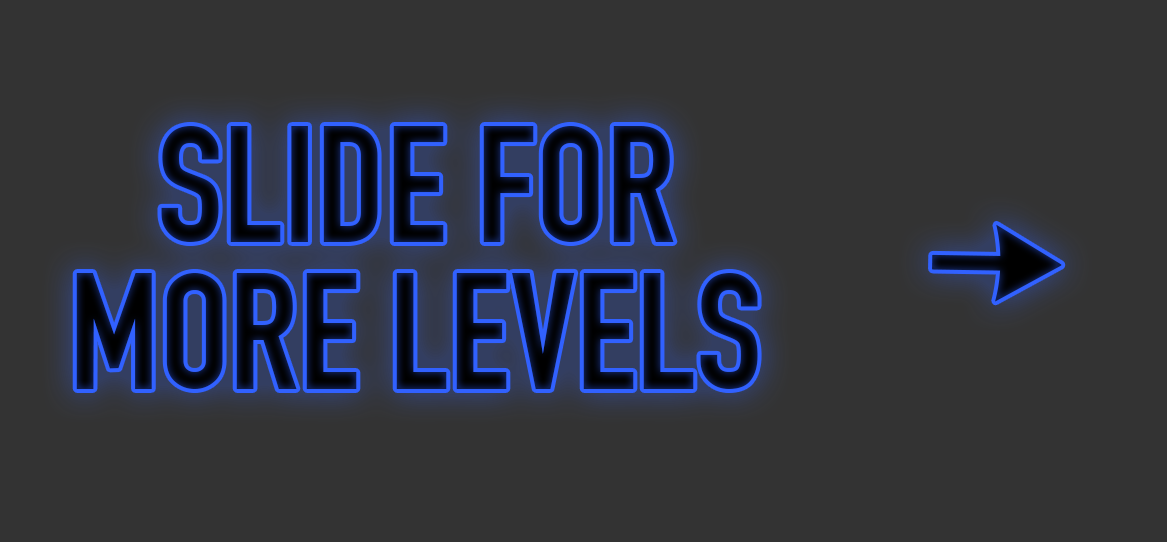
<style>
.page{position:relative;width:1167px;height:542px;background:#333333}
.page>*{position:absolute;margin:0}
.t1{font:162.8px/146.6px "DINEngschrift";color:#050918}
</style>
<div class="page">
<p class="t1" style="left:76px;top:126px;width:682px;height:263px;text-align:center">SLIDE FOR <br>MORE LEVELS</p>
</div>
